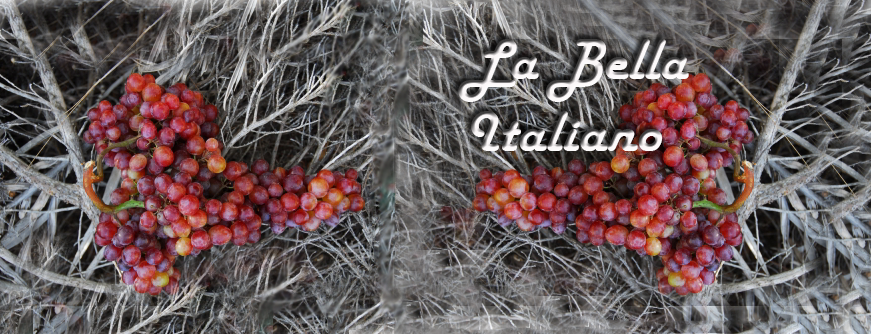
<style>
.page{position:relative;width:872px;height:334px}
.page>*{position:absolute;margin:0}
.t1{font:60px "HarlowSolid"}
</style>
<div class="page">
<p class="t1" style="left:458px;top:39px;width:231px;height:112px">La Bella Italiano</p>
</div>
